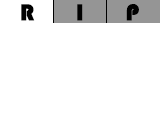
<style>
.page{position:relative;width:160px;height:128px;background:#ffffff}
.page>*{position:absolute;margin:0}
.t1{font:23.9px "Bauhaus93";color:#000000}
</style>
<div class="page">
<p class="t1" style="left:21px;top:4px;width:14px;height:17px">R</p>
<p class="t1" style="left:77px;top:4px;width:6px;height:17px">I</p>
<p class="t1" style="left:126px;top:4px;width:13px;height:17px">P</p>
</div>
